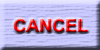
<style>
.page{position:relative;width:100px;height:50px}
.page>*{position:absolute;margin:0}
.t1{font:18px "Arial-BoldMT"}
</style>
<div class="page">
<p class="t1" style="left:13px;top:18px;width:75px;height:15px">CANCEL</p>
</div>
